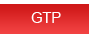
<style>
.page{position:relative;width:89px;height:40px;background:#ffffff}
.page>*{position:absolute;margin:0}
.t1{font:14.7px "ArialMT";color:#ffffff}
</style>
<div class="page">
<p class="t1" style="left:31px;top:12px;width:30px;height:11px">GTP</p>
</div>
